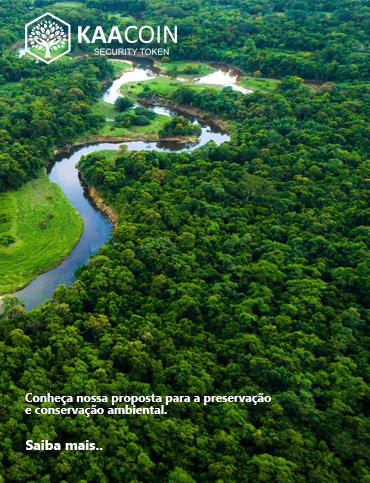
<style>
.page{position:relative;width:370px;height:483px}
.page>*{position:absolute;margin:0}
.t1{font:12px/12px "MyanmarText-Bold";color:#ffffff}
.t2{font:14px "MyanmarText-Bold";color:#ffffff}
</style>
<div class="page">
<p class="t1" style="left:25px;top:393px;width:246px;height:24px">Conheça nossa proposta para a pre­ser­vação<br>e con­ser­vação am­bi­ental.</p>
<p class="t2" style="left:26px;top:440px;width:77px;height:10px">Saiba mais..</p>
</div>
